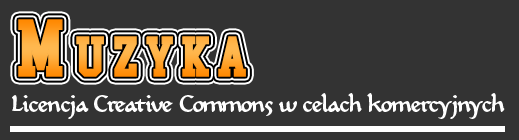
<style>
.page{position:relative;width:519px;height:140px;background:#333333}
.page>*{position:absolute;margin:0}
.t1{font:71.1px "CollegeBlock2.0";letter-spacing:0.15em;font-variant:small-caps}
.t2{font:23.3px "CarlinScriptLTStd-Medium";letter-spacing:-0.1em;color:#ffffff}
</style>
<div class="page">
<p class="t1" style="left:18px;top:19px;width:228px;height:58px">Muzyka</p>
<p class="t2" style="left:12px;top:93px;width:493px;height:26px">Licencja Creative Commons w celach komercyjnych</p>
</div>
